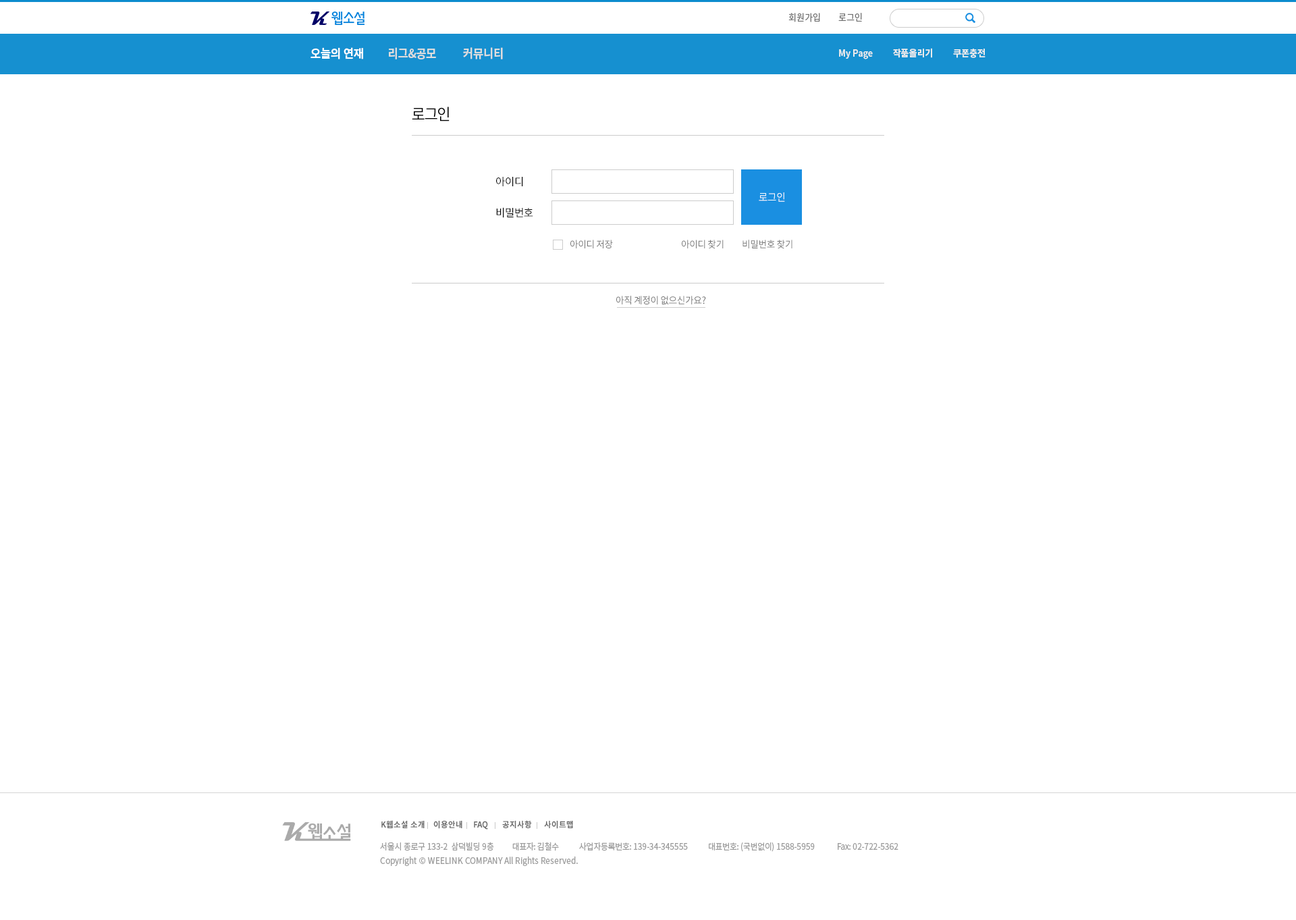
<style>
.page{position:relative;width:1296px;height:920px;background:#ffffff}
.page>*{position:absolute;margin:0}
.t1{font:9.5px "NotoSansCJKkr-Regular";letter-spacing:-0.002em;color:#727272;scale:0.92 1}
.t2{font:12.2px "NotoSansCJKkr-Bold";letter-spacing:-0.002em;color:#dddddd;scale:0.92 1}
.t3{font:12.2px "NotoSansCJKkr-Bold";letter-spacing:-0.002em;color:#ffffff;scale:0.92 1}
.t4{font:9.5px "NotoSansCJKkr-Bold";letter-spacing:-0.002em;color:#ececec;scale:0.92 1}
.t5{font:16.2px "NotoSansCJKkr-Regular";letter-spacing:-0.05em;color:#000000;scale:0.92 1}
.t6{font:10.8px "NotoSansCJKkr-Regular";letter-spacing:-0.03em;color:#000000}
.t7{font:10.8px "NotoSansCJKkr-Regular";letter-spacing:-0.05em;color:#ffffff;scale:0.92 1}
.t8{font:9.5px "NotoSansCJKkr-Regular";letter-spacing:-0.03em;color:#747474}
.t9{font:8.1px "NotoSansCJKkr-Bold";color:#666666;scale:0.96 1}
.t10{font:8.8px "NotoSansCJKkr-Regular";letter-spacing:-0.025em;color:#9d9d9d;scale:0.92 1}
.t11{font:8.8px "NotoSansCJKkr-Regular";color:#9d9d9d;scale:0.92 1}
</style>
<div class="page">
<p class="t1" style="left:788px;top:13px;width:32px;height:9px">회원가입</p>
<p class="t1" style="left:838px;top:13px;width:24px;height:9px">로그인</p>
<p class="t2" style="left:311px;top:47px;width:192px;height:12px"><span class="t3">오늘의 연재         </span>리그&amp;공모          커뮤니티</p>
<p class="t4" style="left:839px;top:48px;width:147px;height:11px">My Page          작품올리기          쿠폰충전</p>
<p class="t5" style="left:412px;top:107px;width:38px;height:15px">로그인</p>
<p class="t6" style="left:496px;top:177px;width:27px;height:9px">아이디</p>
<p class="t7" style="left:759px;top:192px;width:26px;height:10px">로그인</p>
<p class="t6" style="left:496px;top:207px;width:37px;height:11px">비밀번호</p>
<p class="t8" style="left:570px;top:240px;width:43px;height:8px">아이디 저장</p>
<p class="t8" style="left:682px;top:240px;width:42px;height:9px">아이디 찾기</p>
<p class="t8" style="left:743px;top:240px;width:49px;height:9px">비밀번호 찾기</p>
<p class="t8" style="left:616px;top:296px;width:90px;height:8px">아직 계정이 없으신가요?</p>
<p class="t9" style="left:381px;top:820px;width:44px;height:8px">K웹소설 소개</p>
<p class="t9" style="left:433px;top:821px;width:29px;height:8px">이용안내</p>
<p class="t9" style="left:474px;top:821px;width:14px;height:9px">FAQ</p>
<p class="t9" style="left:502px;top:820px;width:30px;height:8px">공지사항</p>
<p class="t9" style="left:544px;top:821px;width:29px;height:8px">사이트맵</p>
<p class="t10" style="left:380px;top:842px;width:518px;height:10px">서울시 종로구 133-2  삼덕빌딩 9층          대표자: 김철수           사업자등록번호: 139-34-345555           대표번호: (국번없이) 1588-5959            Fax: 02-722-5362</p>
<p class="t11" style="left:380px;top:856px;width:198px;height:10px"><span class="t10"><br><br></span>Copyright © WEELINK COMPANY All Rights Reserved.</p>
</div>
